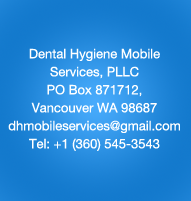
<style>
.page{position:relative;width:191px;height:201px}
.page>*{position:absolute;margin:0}
.t1{font:13px/18px "HelveticaNeue";color:#ffffff}
</style>
<div class="page">
<p class="t1" style="left:8px;top:48px;width:172px;height:103px;text-align:center">Dental Hygiene Mobile <br>Services, PLLC<br>PO Box 871712, <br>Vancouver WA 98687 dhmobileservices@gmail.com<br>Tel: +1 (360) 545-3543</p>
</div>
